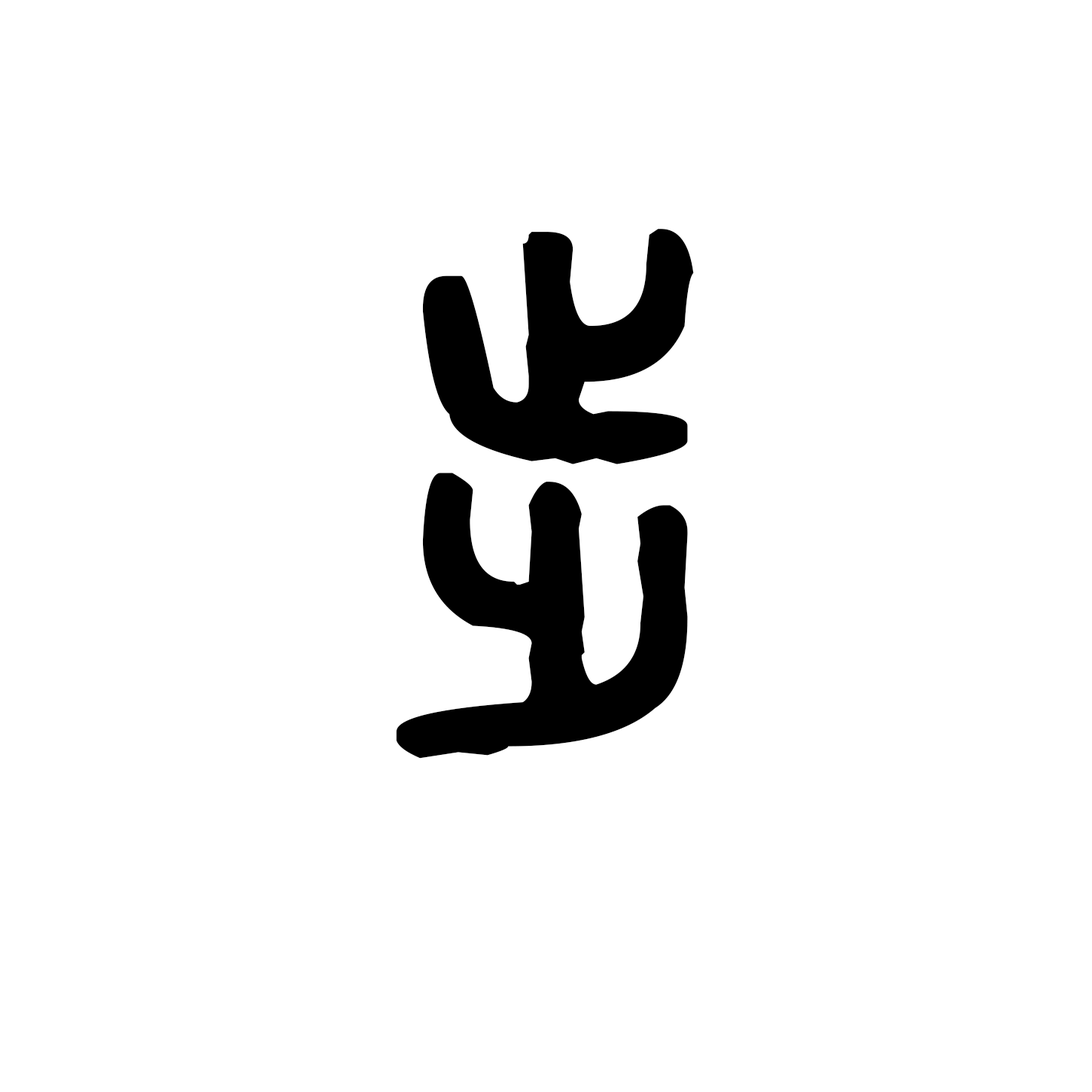
<style>
.page{position:relative;width:1092px;height:1092px;background:#ffffff}
.page>*{position:absolute;margin:0}
.t1{font:752.6px "½ðÎÄ´ó×­Ìå";color:#000000}
</style>
<div class="page">
<p class="t1" style="left:396px;top:229px;width:298px;height:530px">步</p>
</div>
